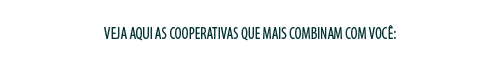
<style>
.page{position:relative;width:500px;height:66px;background:#ffffff}
.page>*{position:absolute;margin:0}
.t1{font:17px "MyriadPro-Cond";color:#033333;text-transform:uppercase;scale:0.9 1}
</style>
<div class="page">
<p class="t1" style="left:104px;top:25px;width:292px;height:16px">Veja aqui as cooperativas que mais combinam com você:</p>
</div>
